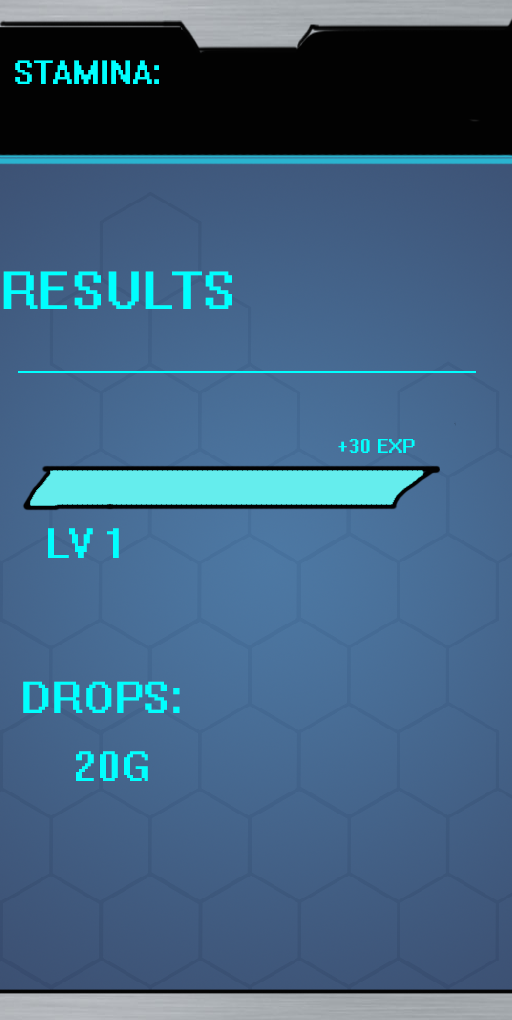
<style>
.page{position:relative;width:512px;height:1020px}
.page>*{position:absolute;margin:0}
.t1{font:30px "System";color:#00ffff}
.t2{font:48px "System";color:#00ffff}
.t3{font:18px "System";color:#00ffff}
.t4{font:38px "System";color:#00ffff}
.t5{font:40px "System";color:#00ffff}
</style>
<div class="page">
<p class="t1" style="left:15px;top:60px;width:144px;height:24px">STAMINA:</p>
<p class="t2" style="left:3px;top:271px;width:229px;height:38px">RESULTS</p>
<p class="t3" style="left:338px;top:439px;width:77px;height:14px">+30 EXP</p>
<p class="t4" style="left:48px;top:528px;width:71px;height:30px">LV 1</p>
<p class="t5" style="left:23px;top:681px;width:157px;height:32px">DROPS:</p>
<p class="t4" style="left:76px;top:751px;width:72px;height:30px">20G</p>
</div>
